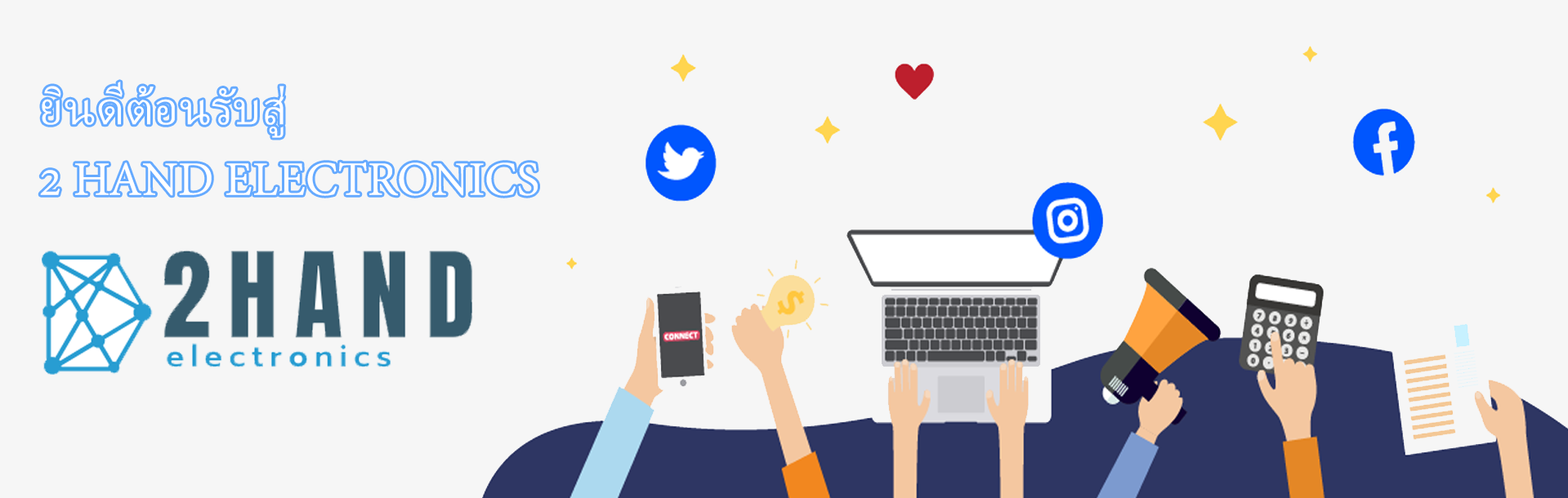
<style>
.page{position:relative;width:1568px;height:498px;background:#f6f6f6}
.page>*{position:absolute;margin:0}
.t1{font:58.8px "AdobeThai-Regular";color:#ffffff}
</style>
<div class="page">
<p class="t1" style="left:40px;top:82px;width:498px;height:114px">ยินดีต้อนรับสู่<br>2 HAND ELECTRONICS</p>
</div>
